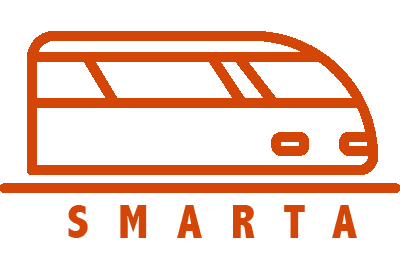
<style>
.page{position:relative;width:400px;height:276px;background:#ffffff}
.page>*{position:absolute;margin:0}
.t1{font:48px "AbadiMT-CondensedExtraBold";letter-spacing:0.6em;color:#d34607}
</style>
<div class="page">
<p class="t1" style="left:68px;top:205px;width:289px;height:33px">SMARTA</p>
</div>
